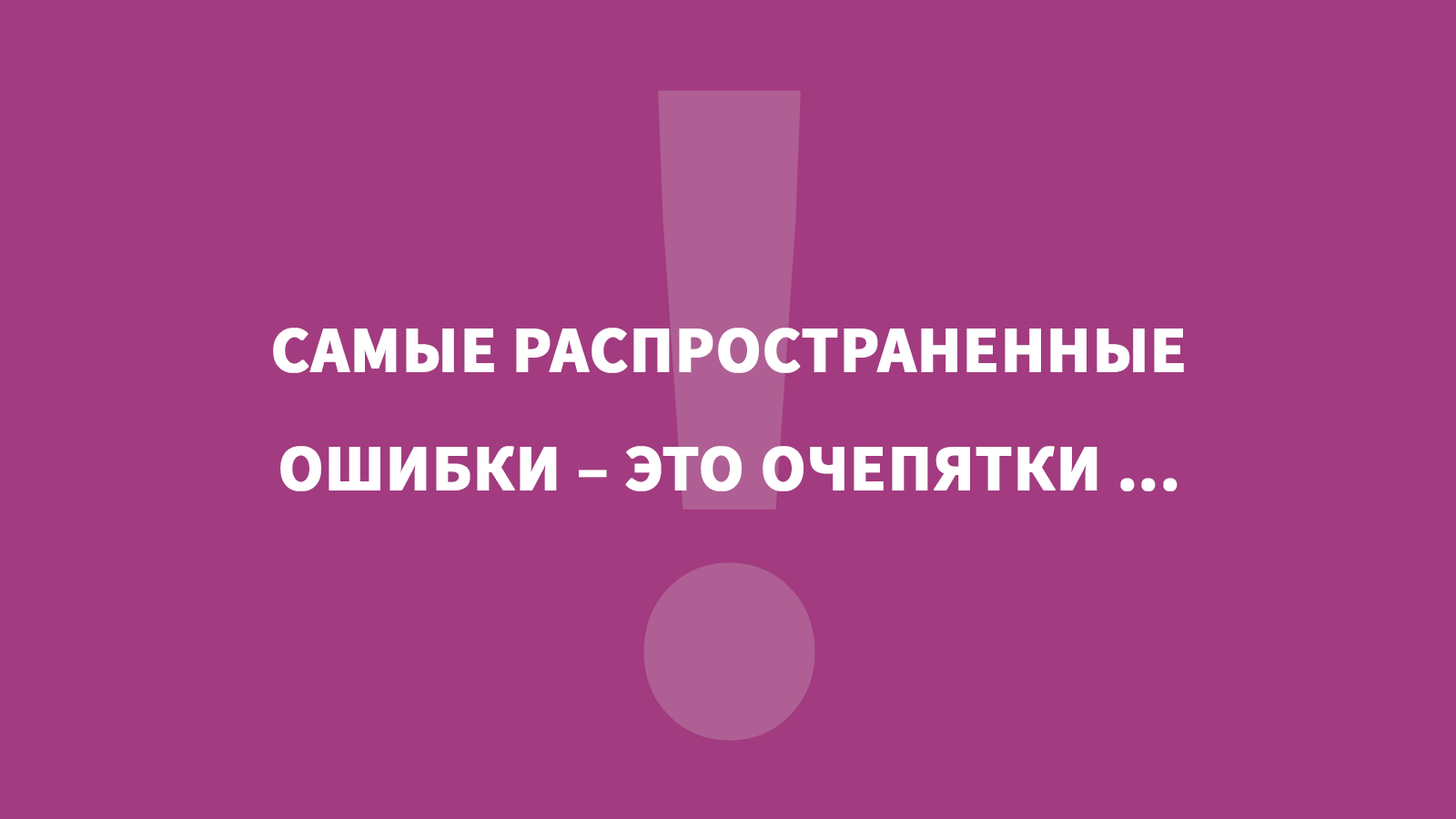
<style>
.page{position:relative;width:1456px;height:819px;background:#a23b80}
.page>*{position:absolute;margin:0}
.t1{font:65.5px/109.2px "SourceSansPro-Bold";color:#ffffff;text-transform:uppercase;font-weight:bold}
</style>
<div class="page">
<p class="t1" style="left:273px;top:328px;width:911px;height:163px;text-align:center">самые распространенные<br>ошибки – это очепятки ...</p>
</div>
